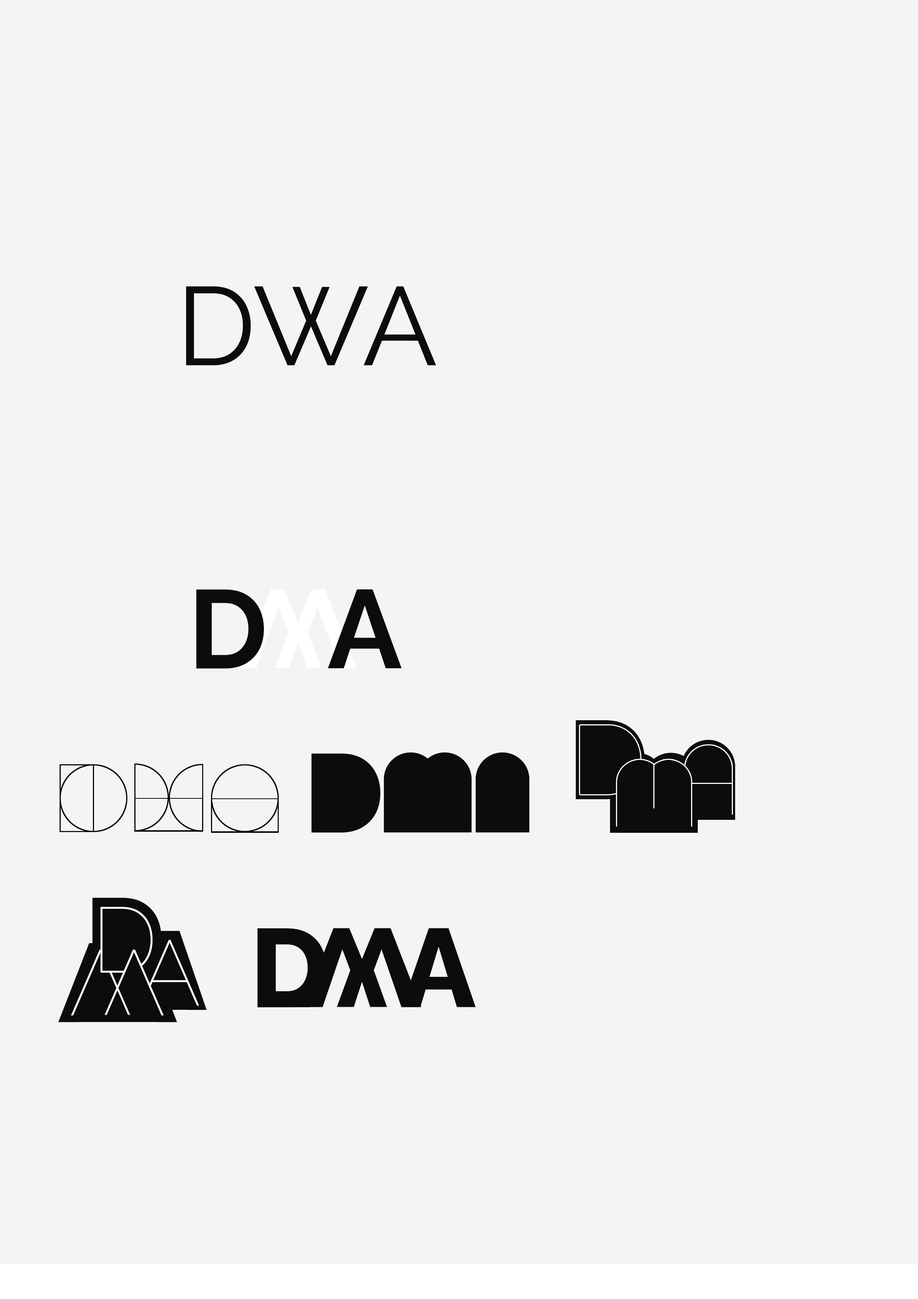
<style>
.page{position:relative;width:918px;height:1299px;background:#f4f4f4}
.page>*{position:absolute;margin:0}
.t1{font:111.1px "Raleway-Regular";color:#0c0c0c;text-transform:uppercase}
.t2{font:111.1px "Raleway-Bold";color:#0c0c0c;text-transform:uppercase}
.t3{font:111.1px "Raleway-ExtraBold";color:#0c0c0c;text-transform:uppercase}
</style>
<div class="page">
<p class="t1" style="left:186px;top:286px;width:250px;height:79px">dWa</p>
<p class="t2" style="left:196px;top:589px;width:68px;height:80px">d</p>
<p class="t2" style="left:328px;top:589px;width:74px;height:79px">A</p>
<p class="t3" style="left:257px;top:928px;width:70px;height:79px">d</p>
<p class="t3" style="left:302px;top:928px;width:119px;height:79px;rotate:180deg">w</p>
<p class="t3" style="left:402px;top:928px;width:74px;height:79px">A</p>
</div>
